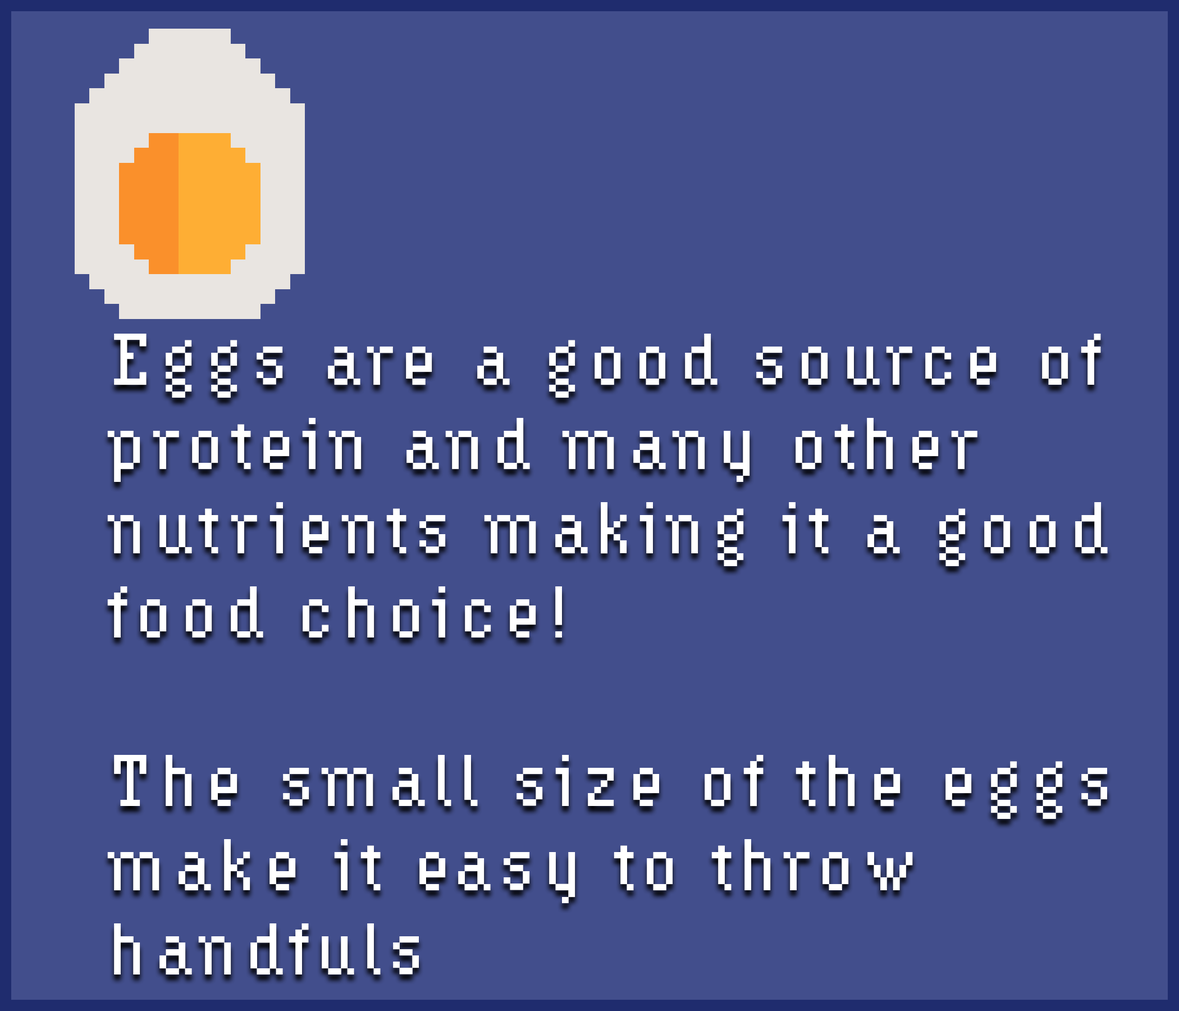
<style>
.page{position:relative;width:1179px;height:1011px;background:#424e8c}
.page>*{position:absolute;margin:0}
.t1{font:70.2px "HydrophiliaIced";letter-spacing:0.1em;color:#ffffff}
</style>
<div class="page">
<p class="t1" style="left:107px;top:334px;width:1001px;height:640px">Eggs are a good source of <br>protein and many other <br>nutrients making it a good<br>food choice!<br><br>The small size of the eggs<br>make it easy to throw <br>handfuls</p>
</div>
